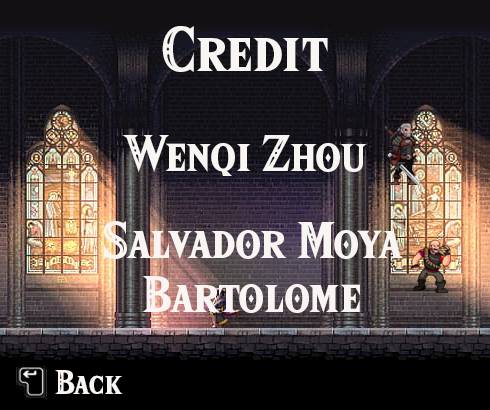
<style>
.page{position:relative;width:490px;height:410px}
.page>*{position:absolute;margin:0}
.t1{font:55px "HyliaSerifBeta-Regular";color:#f9f5f2}
.t2{font:45px "HyliaSerifBeta-Regular";color:#f9f5f2}
.t3{font:30px "HyliaSerifBeta-Regular";color:#f9f5f2}
</style>
<div class="page">
<p class="t1" style="left:162px;top:26px;width:166px;height:46px">Credit</p>
<p class="t2" style="left:122px;top:135px;width:245px;height:41px">Wenqi Zhou</p>
<p class="t2" style="left:103px;top:221px;width:300px;height:92px;text-align:center">Salvador Moya <br>Bartolome</p>
<p class="t3" style="left:55px;top:370px;width:68px;height:24px">Back</p>
</div>
